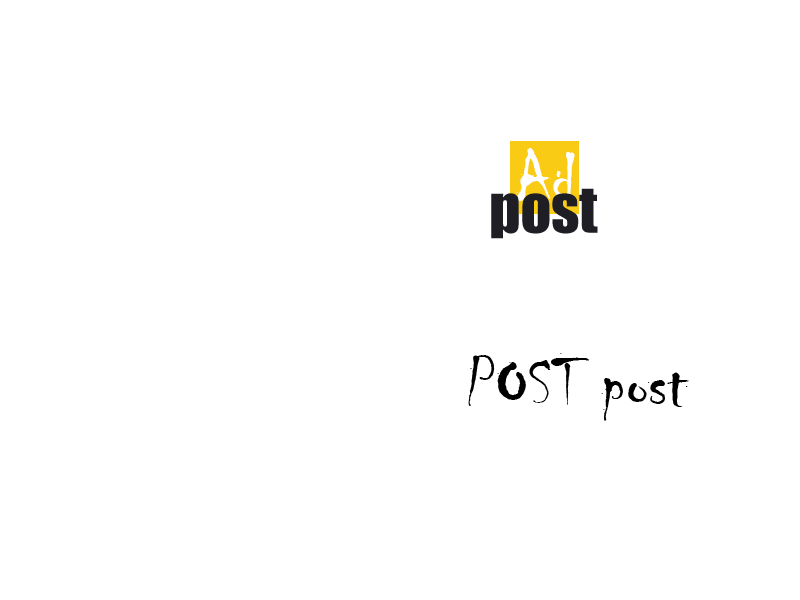
<style>
.page{position:relative;width:800px;height:600px;background:#ffffff}
.page>*{position:absolute;margin:0}
.t1{font:72px "Chiller-Regular";color:#ffffff}
.t2{font:60px "Impact";color:#201e25}
.t3{font:72px "Chiller-Regular";color:#000000}
</style>
<div class="page">
<p class="t1" style="left:516px;top:148px;width:59px;height:55px">Ad</p>
<p class="t2" style="left:491px;top:188px;width:107px;height:51px">post</p>
<p class="t3" style="left:468px;top:353px;width:221px;height:68px">POST post</p>
</div>
